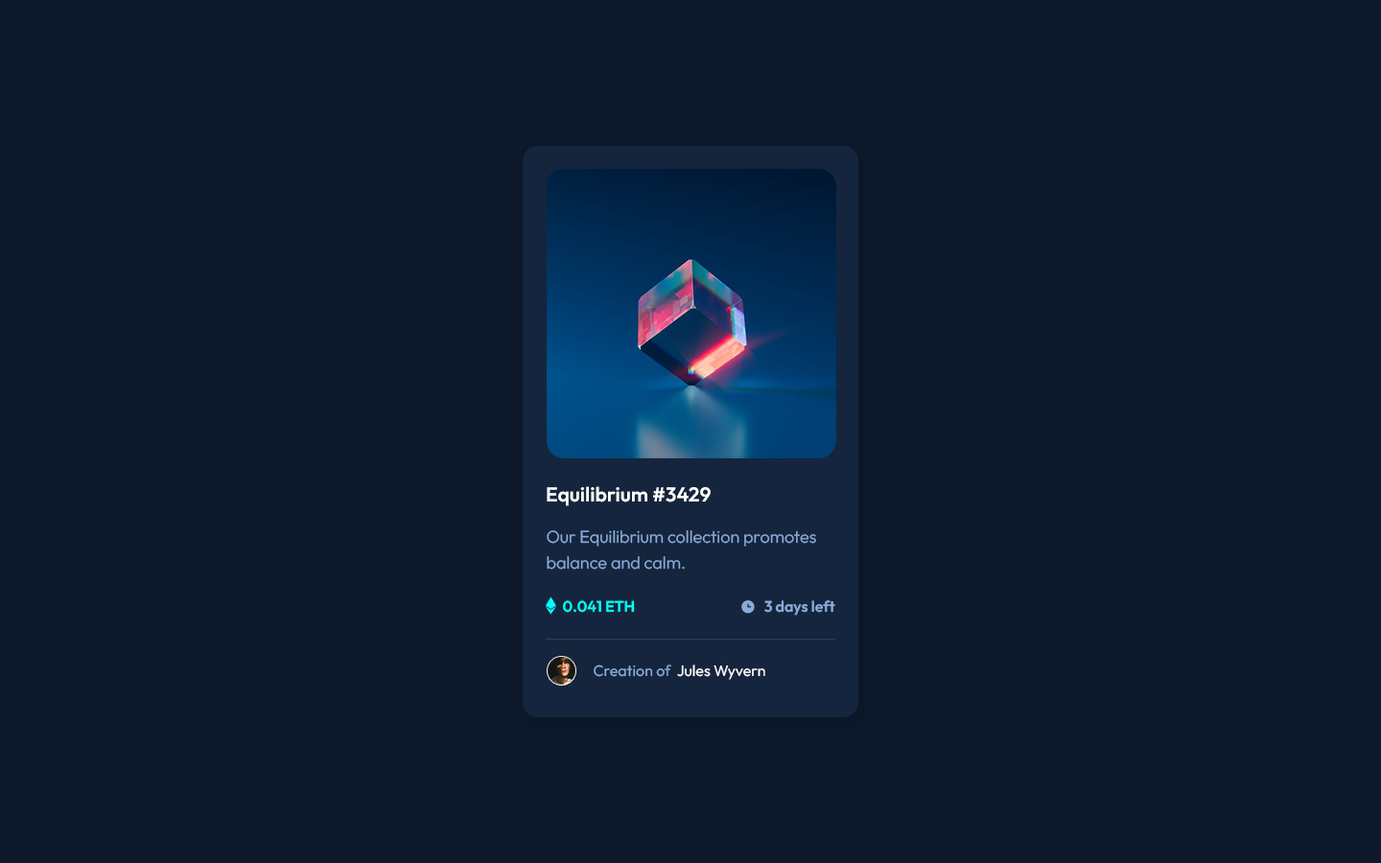
<style>
.page{position:relative;width:1381px;height:863px;background:#0d192b}
.page>*{position:absolute;margin:0}
.t1{font:20.1px "Outfit-SemiBold";color:#ffffff}
.t2{font:17.3px/25.9px "Outfit-Light";color:#8bacda}
.t3{font:15.3px "Outfit-SemiBold";color:#00fff7}
.t4{font:15.3px "Outfit-SemiBold";color:#8bacda}
.t5{font:15.3px "Outfit-Regular";color:#ffffff}
.t6{font:15.3px "Outfit-Regular";color:#8bacda}
</style>
<div class="page">
<p class="t1" style="left:547px;top:486px;width:164px;height:20px">Equilibrium #3429</p>
<p class="t2" style="left:547px;top:530px;width:269px;height:40px">Our Equilibrium collection promotes <br>balance and calm.</p>
<p class="t3" style="left:562px;top:600px;width:73px;height:13px">0.041 ETH</p>
<p class="t4" style="left:764px;top:600px;width:71px;height:16px">3 days left</p>
<p class="t5" style="left:594px;top:665px;width:171px;height:15px"><span class="t6">Creation of  </span>Jules Wyvern</p>
</div>
